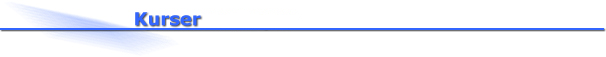
<style>
.page{position:relative;width:606px;height:57px;background:#ffffff}
.page>*{position:absolute;margin:0}
.t1{font:18px "Verdana-Bold";color:#3366ff}
</style>
<div class="page">
<p class="t1" style="left:135px;top:12px;width:66px;height:14px">Kurser</p>
</div>
